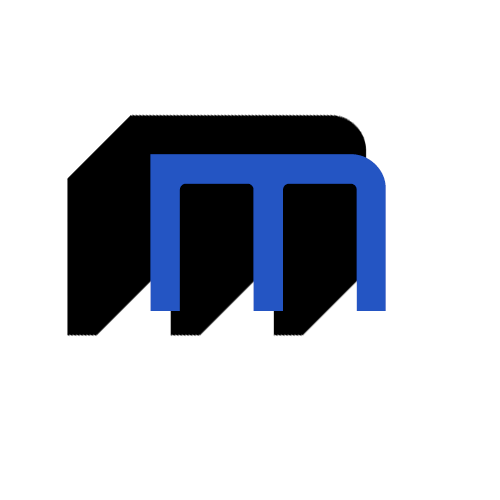
<style>
.page{position:relative;width:500px;height:500px;background:#ffffff}
.page>*{position:absolute;margin:0}
.t1{font:270px "Orbitron-Medium";color:#2455c3}
</style>
<div class="page">
<p class="t1" style="left:150px;top:154px;width:236px;height:157px">m</p>
</div>
